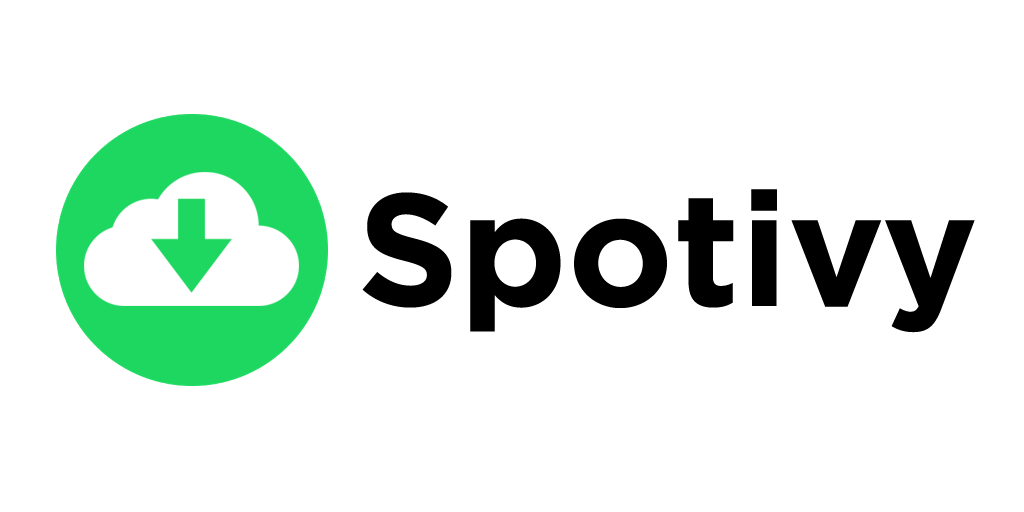
<style>
.page{position:relative;width:1024px;height:512px;background:#ffffff}
.page>*{position:absolute;margin:0}
.t1{font:160px "Gotham-Bold";color:#000000}
</style>
<div class="page">
<p class="t1" style="left:362px;top:189px;width:613px;height:144px">Spotivy</p>
</div>
